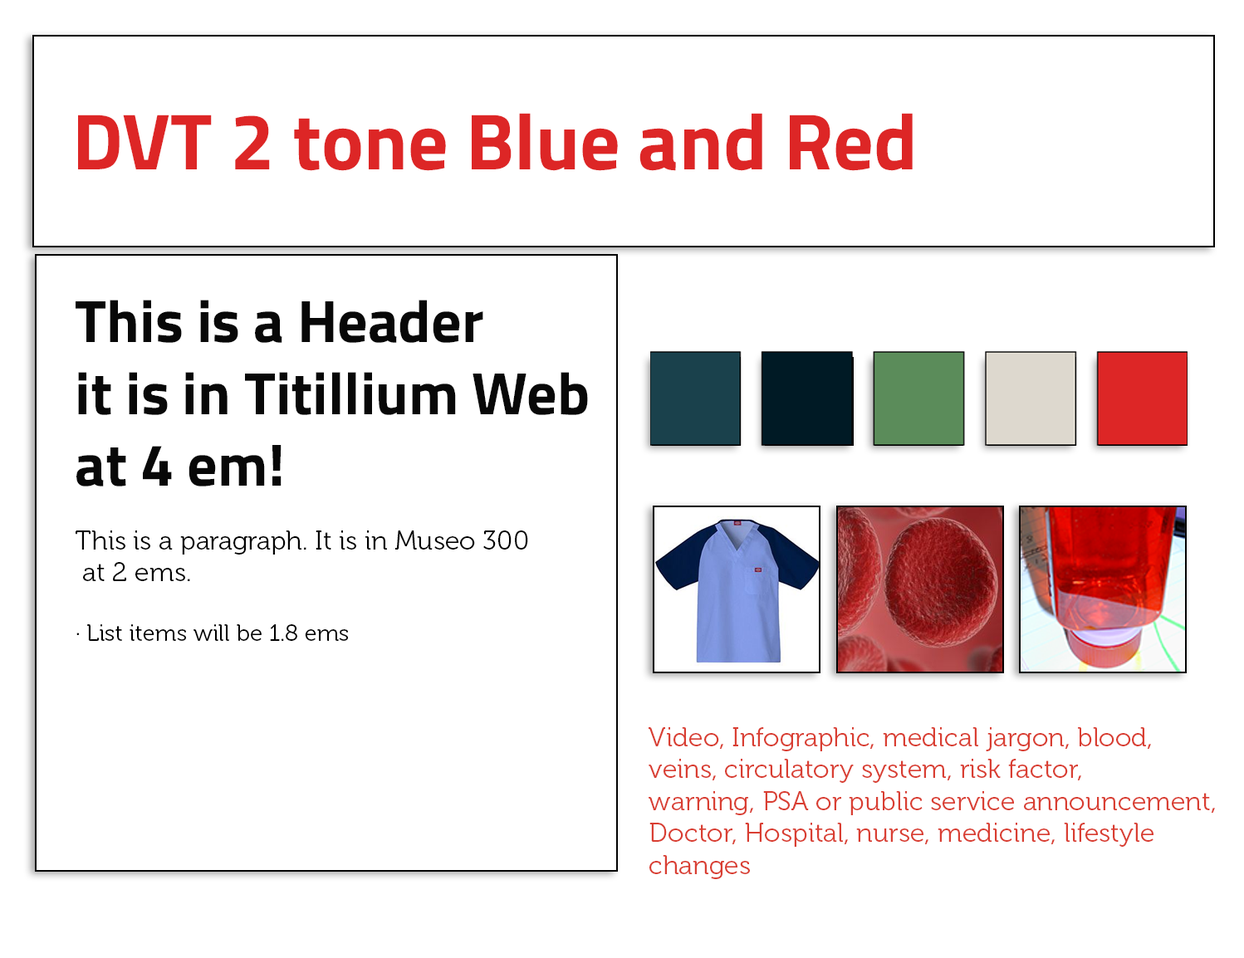
<style>
.page{position:relative;width:1244px;height:958px;background:#ffffff}
.page>*{position:absolute;margin:0}
.t1{font:79.7px "TitilliumWeb-Bold";color:#dd2626}
.t2{font:26.6px "Museo-300";color:#000000}
.t3{font:59.8px "TitilliumWeb-Bold";color:#080808}
.t4{font:23.3px "Museo-300";color:#000000}
.t5{font:26.6px "Museo-300";color:#d93e32}
</style>
<div class="page">
<p class="t1" style="left:78px;top:113px;width:835px;height:58px">DVT 2 tone Blue and Red</p>
<p class="t2" style="left:76px;top:300px;width:512px;height:341px"><span class="t3">This is a Header <br>it is in Titillium Web<br>at 4 em!<br><br></span>This is a paragraph. It is in Museo 300<br> at 2 ems.<br><br><span class="t4">· List items will be 1.8 ems</span></p>
<p class="t5" style="left:649px;top:728px;width:566px;height:152px">Video, Infographic, medical jargon, blood, <br>veins, circulatory system, risk factor, <br>warning, PSA or public service announcement, <br>Doctor, Hospital, nurse, medicine, lifestyle <br>changes</p>
</div>
